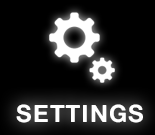
<style>
.page{position:relative;width:155px;height:135px;background:#000000}
.page>*{position:absolute;margin:0}
.t1{font:24px "AlteHaasGrotesk_Bold";letter-spacing:0.05em;color:#ffffff}
</style>
<div class="page">
<p class="t1" style="left:16px;top:104px;width:127px;height:19px">SETTINGS</p>
</div>
